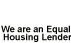
<style>
.page{position:relative;width:71px;height:43px;background:#ffffff}
.page>*{position:absolute;margin:0}
.t1{font:9px "Arial-BoldMT";color:#060400}
</style>
<div class="page">
<p class="t1" style="left:1px;top:25px;width:69px;height:9px">We are an Equal</p>
<p class="t1" style="left:3px;top:33px;width:68px;height:9px">Housing Lender</p>
</div>
